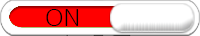
<style>
.page{position:relative;width:200px;height:36px;background:#ffffff}
.page>*{position:absolute;margin:0}
.t1{font:24px "Gulim";color:#000000}
</style>
<div class="page">
<p class="t1" style="left:46px;top:9px;width:33px;height:17px">ON</p>
</div>
